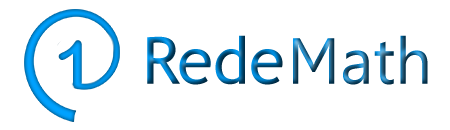
<style>
.page{position:relative;width:450px;height:130px;background:#ffffff}
.page>*{position:absolute;margin:0}
.t1{font:65px "ArialRoundedMTBold"}
.t2{font:65px "TrebuchetMS"}
.t3{font:65px "Leelawadee"}
</style>
<div class="page">
<p class="t1" style="left:58px;top:40px;width:24px;height:48px">1</p>
<p class="t2" style="left:147px;top:35px;width:136px;height:50px">Rede</p>
<p class="t3" style="left:293px;top:35px;width:135px;height:50px">Math</p>
</div>
